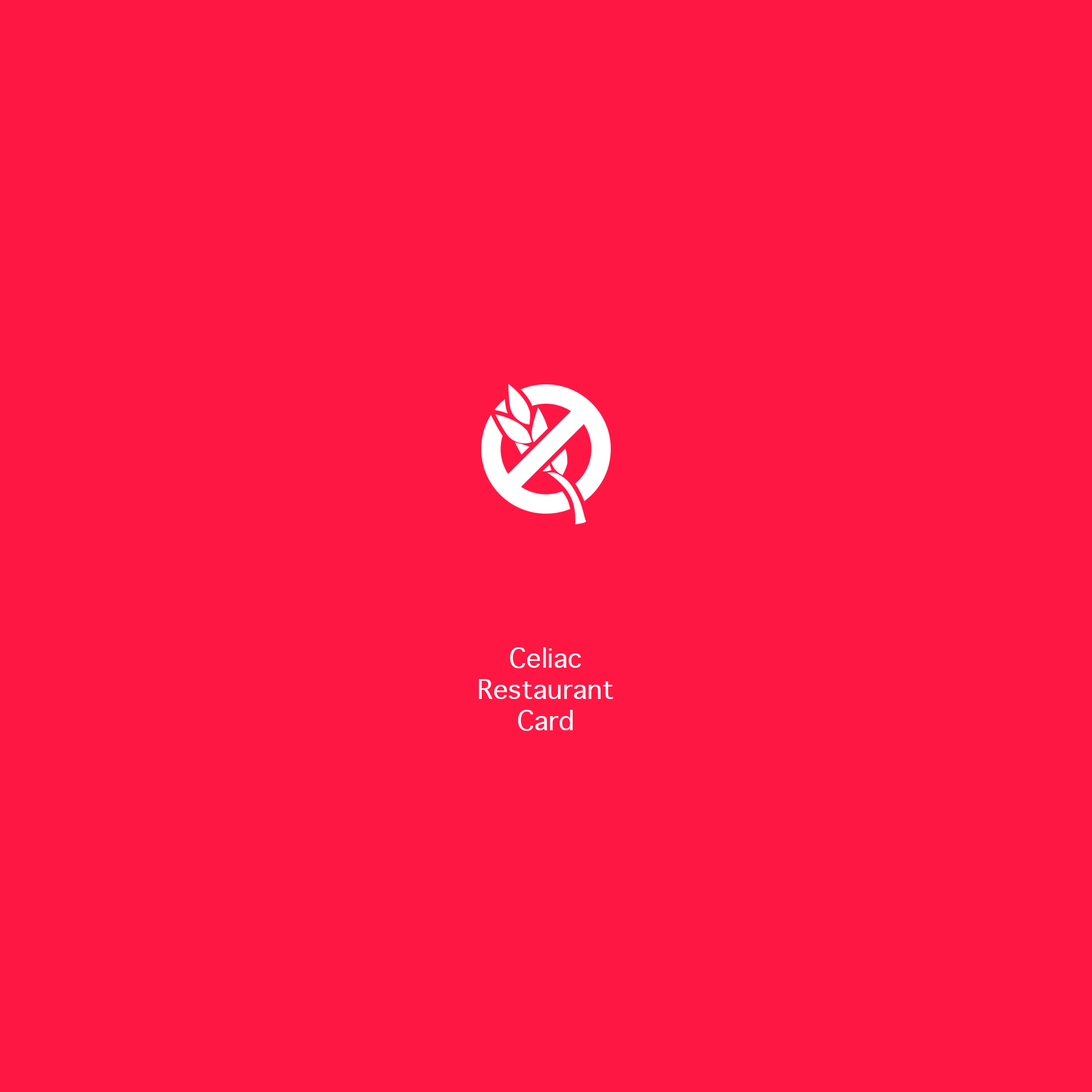
<style>
.page{position:relative;width:1092px;height:1092px;background:#ff1744}
.page>*{position:absolute;margin:0}
.t1{font:26.1px "Geneva";color:#ffffff}
</style>
<div class="page">
<p class="t1" style="left:479px;top:647px;width:134px;height:84px;text-align:center">Celiac<br>Restaurant<br>Card</p>
</div>
